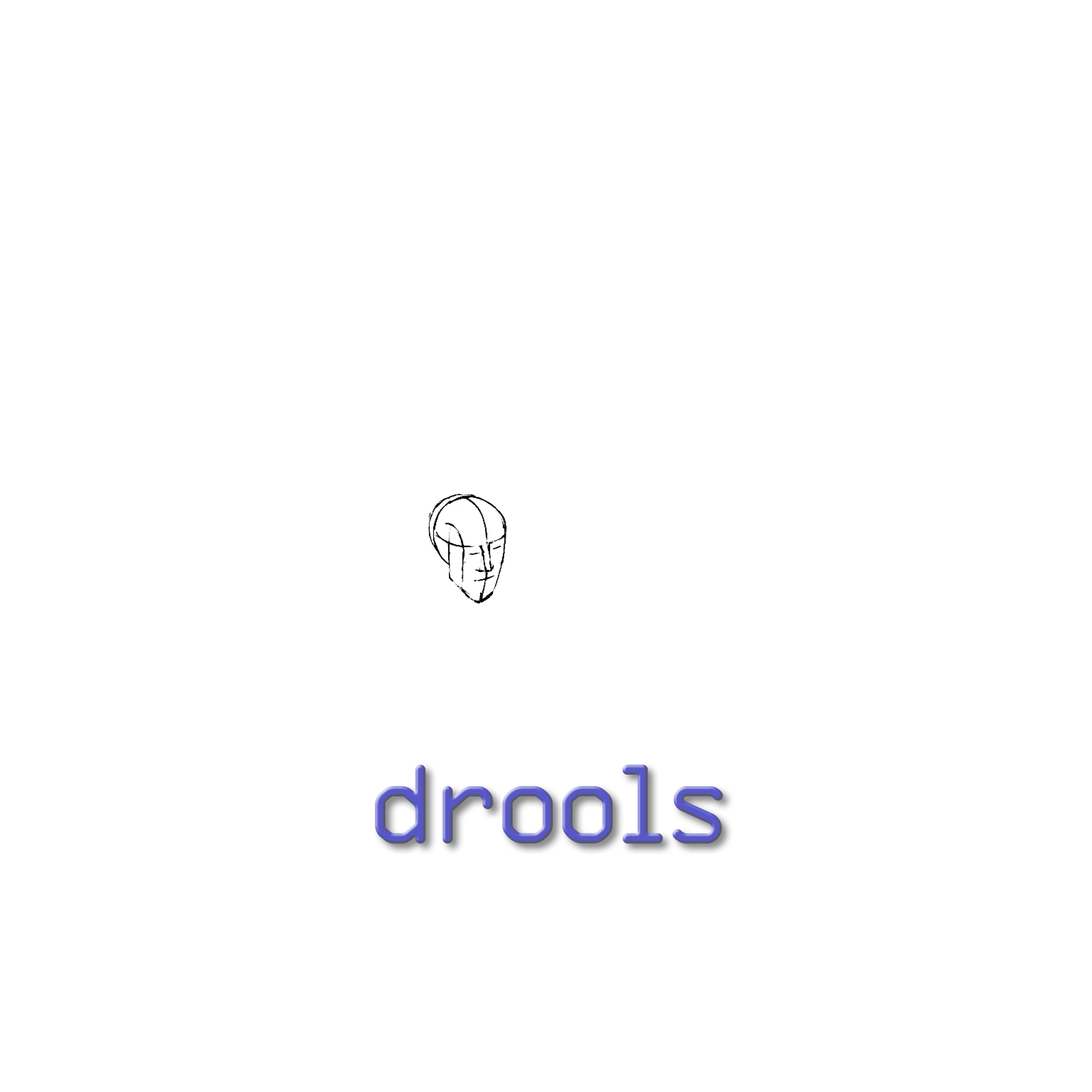
<style>
.page{position:relative;width:1092px;height:1092px;background:#ffffff}
.page>*{position:absolute;margin:0}
.t1{font:121.3px "OCR-AII";letter-spacing:-0.11em}
.t2{font:121.3px "OCR-AII";letter-spacing:-0.05em}
.t3{font:121.3px "OCR-AII";letter-spacing:-0.15em}
</style>
<div class="page">
<p class="t1" style="left:375px;top:764px;width:348px;height:80px"><span class="t2">d</span>ro<span class="t3">ol</span>s</p>
</div>
